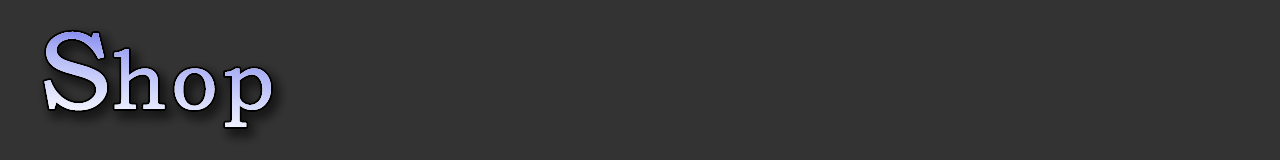
<style>
.page{position:relative;width:1280px;height:160px;background:#333333}
.page>*{position:absolute;margin:0}
.t1{font:82.2px "BookmanOldStyle";letter-spacing:0.08em;font-weight:bold}
.t2{font:110px "BookmanOldStyle";font-weight:bold}
</style>
<div class="page">
<p class="t1" style="left:44px;top:31px;width:227px;height:96px"><span class="t2">S</span>hop</p>
</div>
